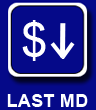
<style>
.page{position:relative;width:96px;height:110px;background:#050989}
.page>*{position:absolute;margin:0}
.t1{font:48px "ArialMT";color:#ffffff}
.t2{font:18.5px "Arial-BoldMT";color:#feffff}
</style>
<div class="page">
<p class="t1" style="left:22px;top:20px;width:24px;height:41px">$</p>
<p class="t2" style="left:7px;top:94px;width:81px;height:13px">LAST MD</p>
</div>
